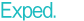
<style>
.page{position:relative;width:84px;height:21px;background:#ffffff}
.page>*{position:absolute;margin:0}
.t1{font:20px "GothicMB101Pro-Regular";letter-spacing:-0.06em;color:#1dbcc0;scale:0.9 1}
</style>
<div class="page">
<p class="t1" style="left:1px;top:2px;width:55px;height:19px">Exped.</p>
</div>
